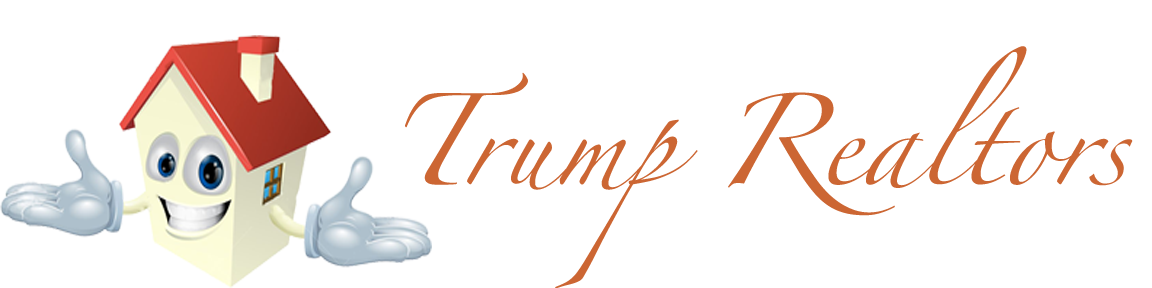
<style>
.page{position:relative;width:1152px;height:288px;background:#ffffff}
.page>*{position:absolute;margin:0}
.t1{font:82px "Zapfino";color:#cc6633}
</style>
<div class="page">
<p class="t1" style="left:405px;top:46px;width:728px;height:243px">Trump Realtors</p>
</div>
